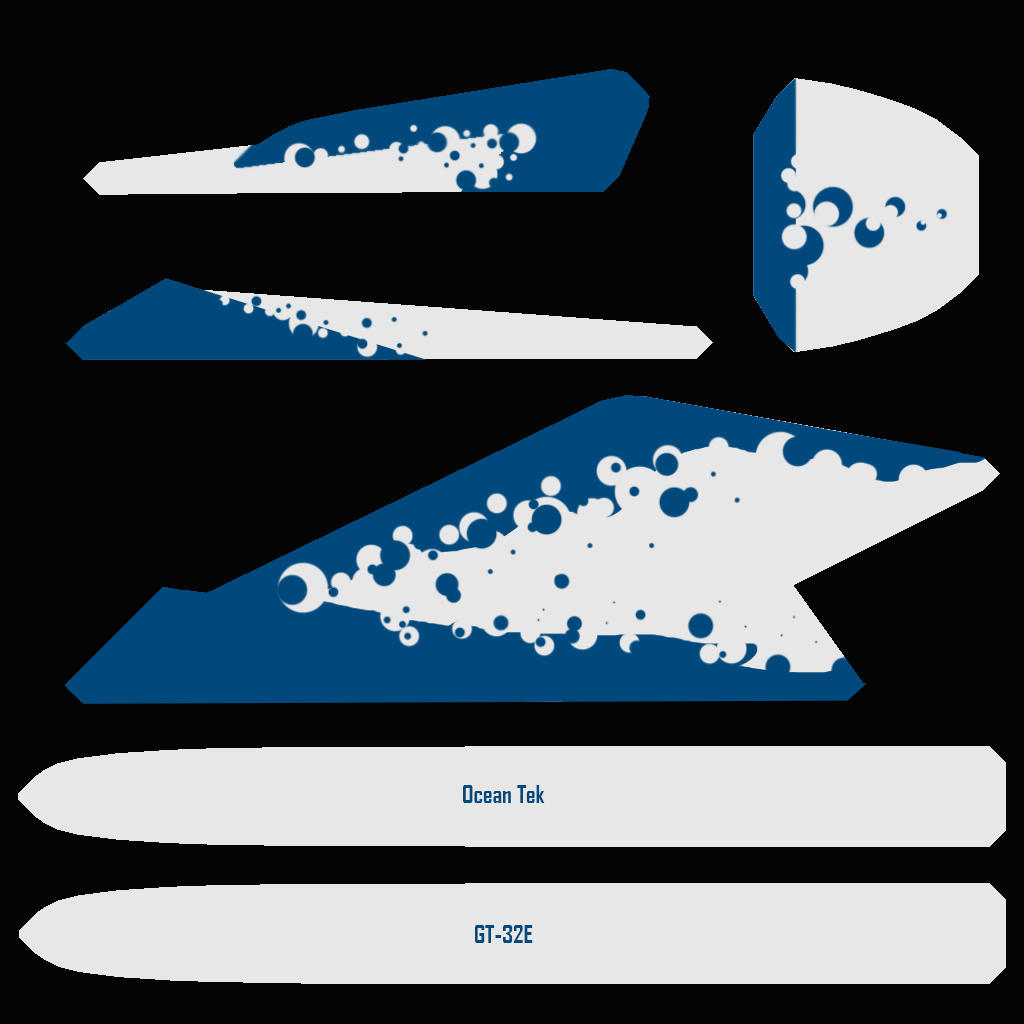
<style>
.page{position:relative;width:1024px;height:1024px;background:#040404}
.page>*{position:absolute;margin:0}
.t1{font:24px "AgencyFB-Bold";color:#01497c}
</style>
<div class="page">
<p class="t1" style="left:463px;top:785px;width:82px;height:18px">Ocean Tek</p>
<p class="t1" style="left:475px;top:925px;width:58px;height:18px">GT-32E</p>
</div>
